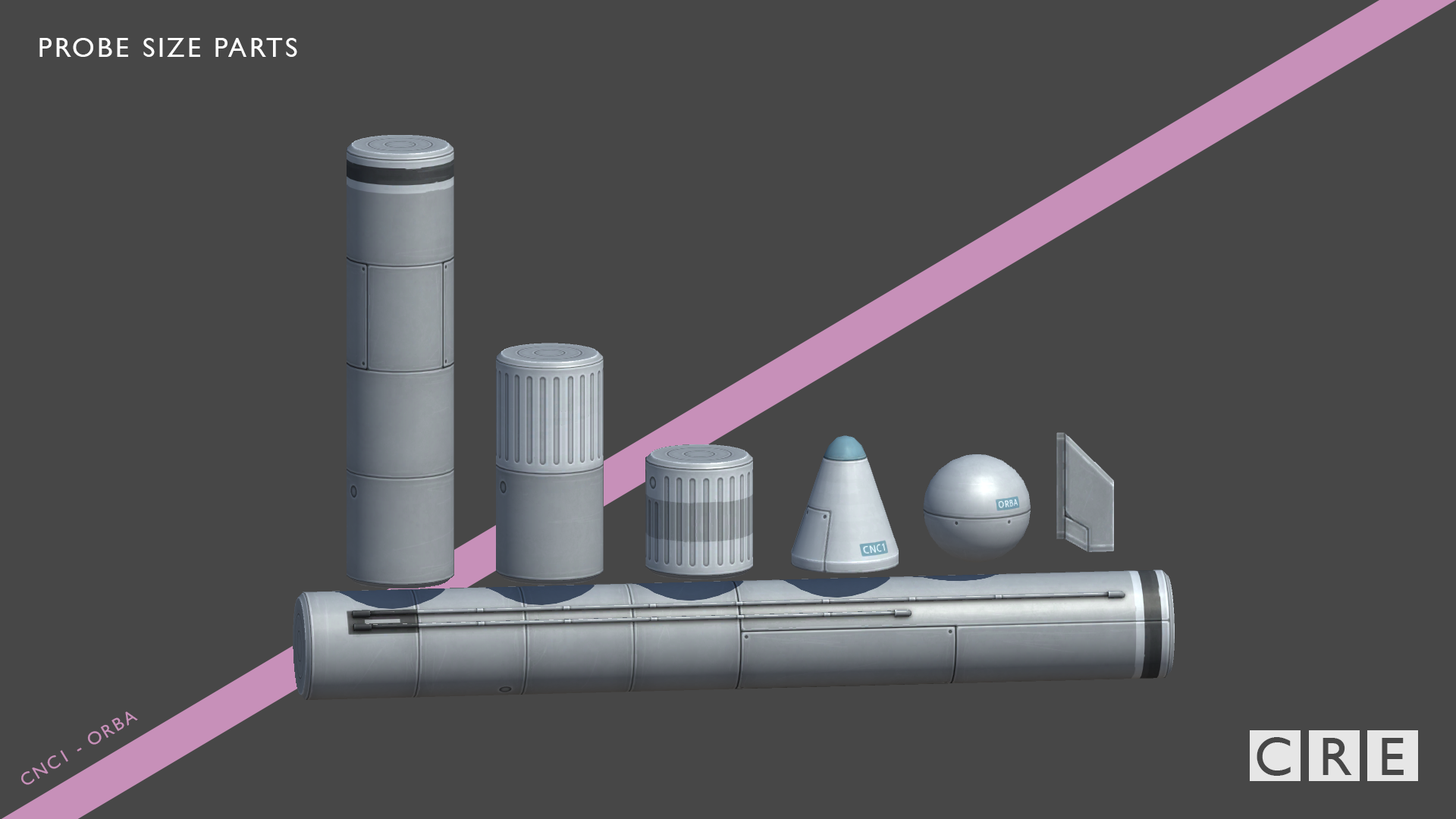
<style>
.page{position:relative;width:1456px;height:819px;background:#474747}
.page>*{position:absolute;margin:0}
.t1{font:27.3px "GillSansMT";letter-spacing:0.1em;color:#ffffff}
.t2{font:54.6px "GillSansMT";letter-spacing:0.1em;color:#474747}
</style>
<div class="page">
<p class="t1" style="left:39px;top:38px;width:258px;height:19px">PROBE SIZE PARTS</p>
<p class="t2" style="left:1257px;top:737px;width:147px;height:39px">C R E</p>
</div>
